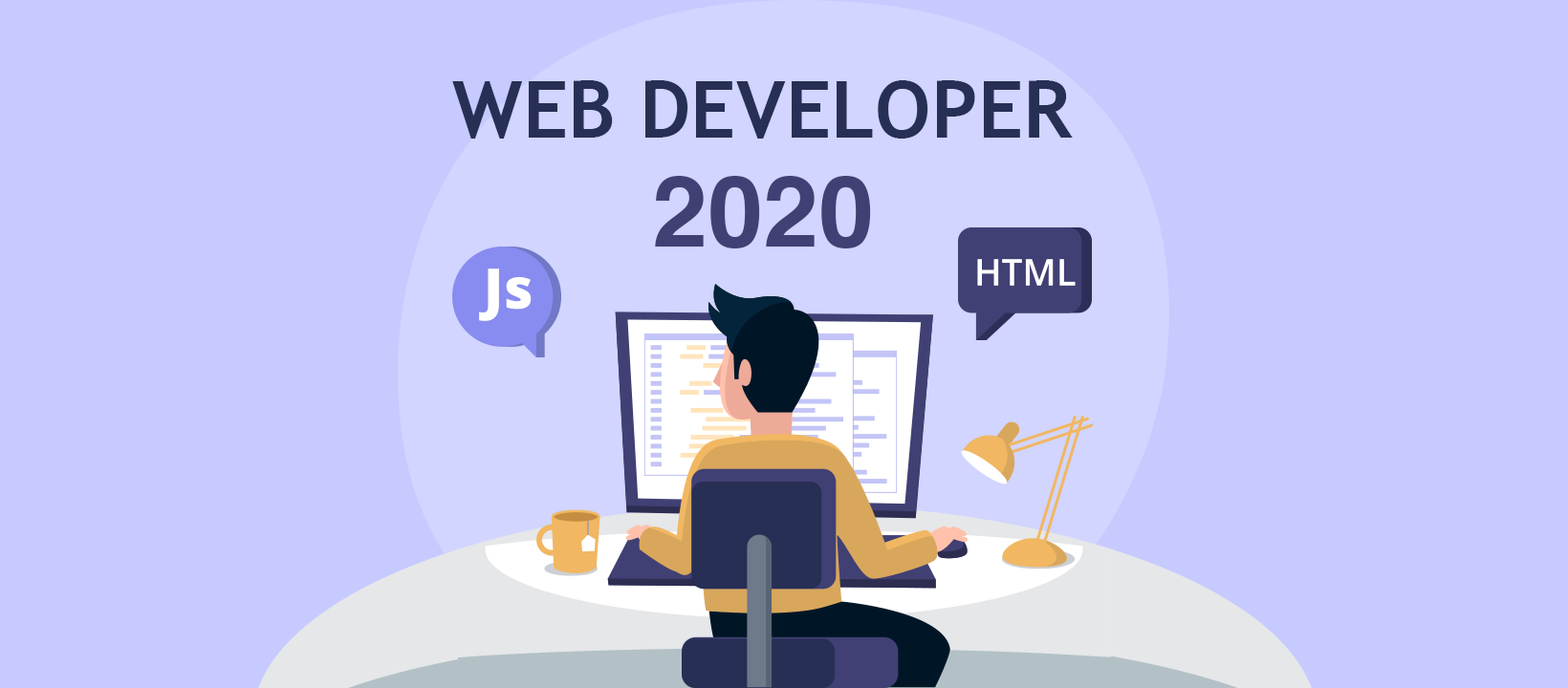
<style>
.page{position:relative;width:1568px;height:688px;background:#c6caff}
.page>*{position:absolute;margin:0}
.t1{font:79.7px "TrebuchetMS-Bold";color:#272f55;text-transform:uppercase}
.t2{font:99.6px "Helvetica-Bold";color:#414074}
</style>
<div class="page">
<p class="t1" style="left:452px;top:80px;width:621px;height:59px">Web Developer</p>
<p class="t2" style="left:655px;top:176px;width:216px;height:73px">2020</p>
</div>
